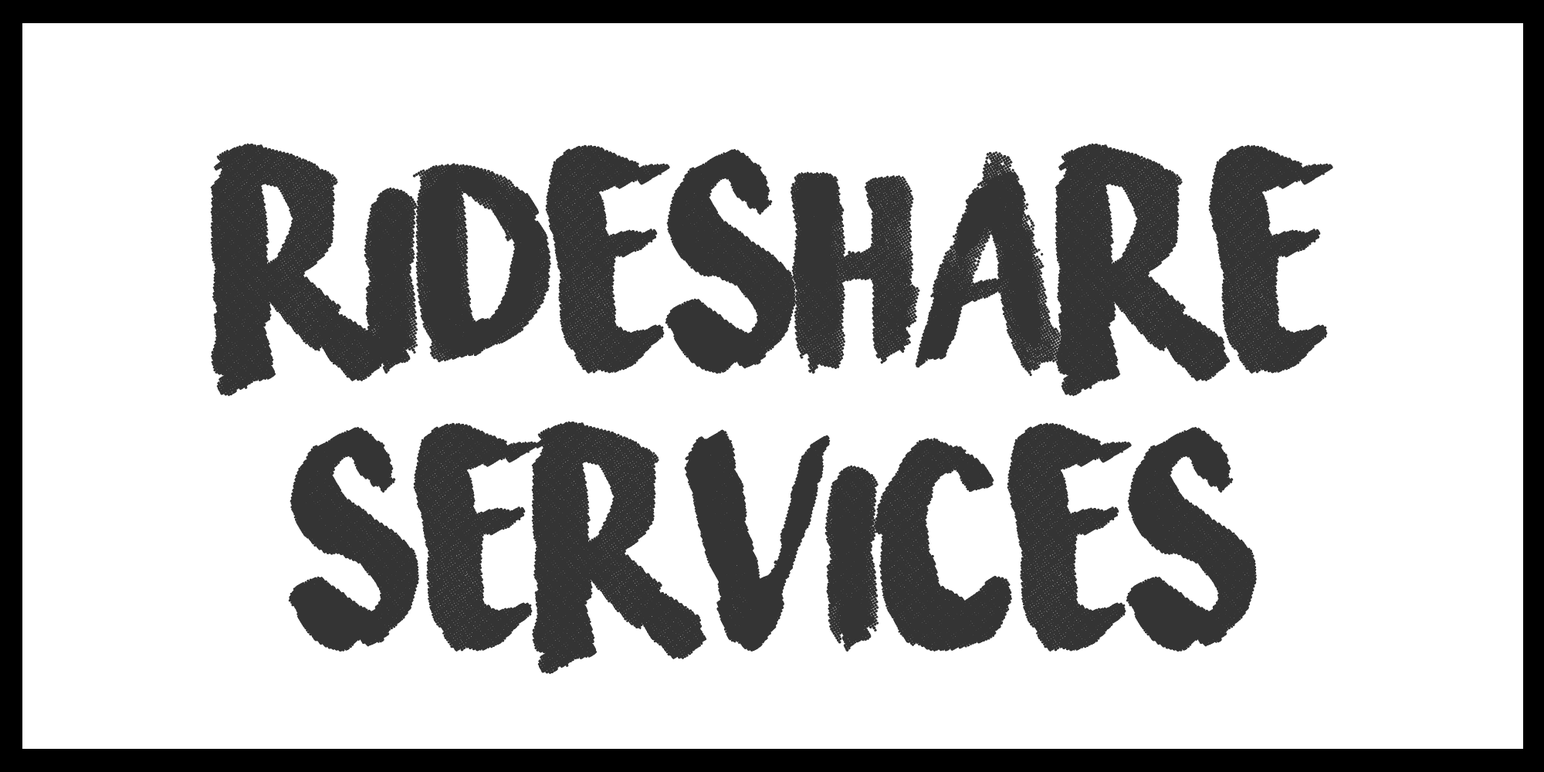
<style>
.page{position:relative;width:1544px;height:772px;background:#ffffff}
.page>*{position:absolute;margin:0}
.t1{font:231.6px "SurfingCapital";color:#343434}
</style>
<div class="page">
<p class="t1" style="left:211px;top:144px;width:1122px;height:530px;text-align:center">RIDESHARE<br>SERVICES</p>
</div>
